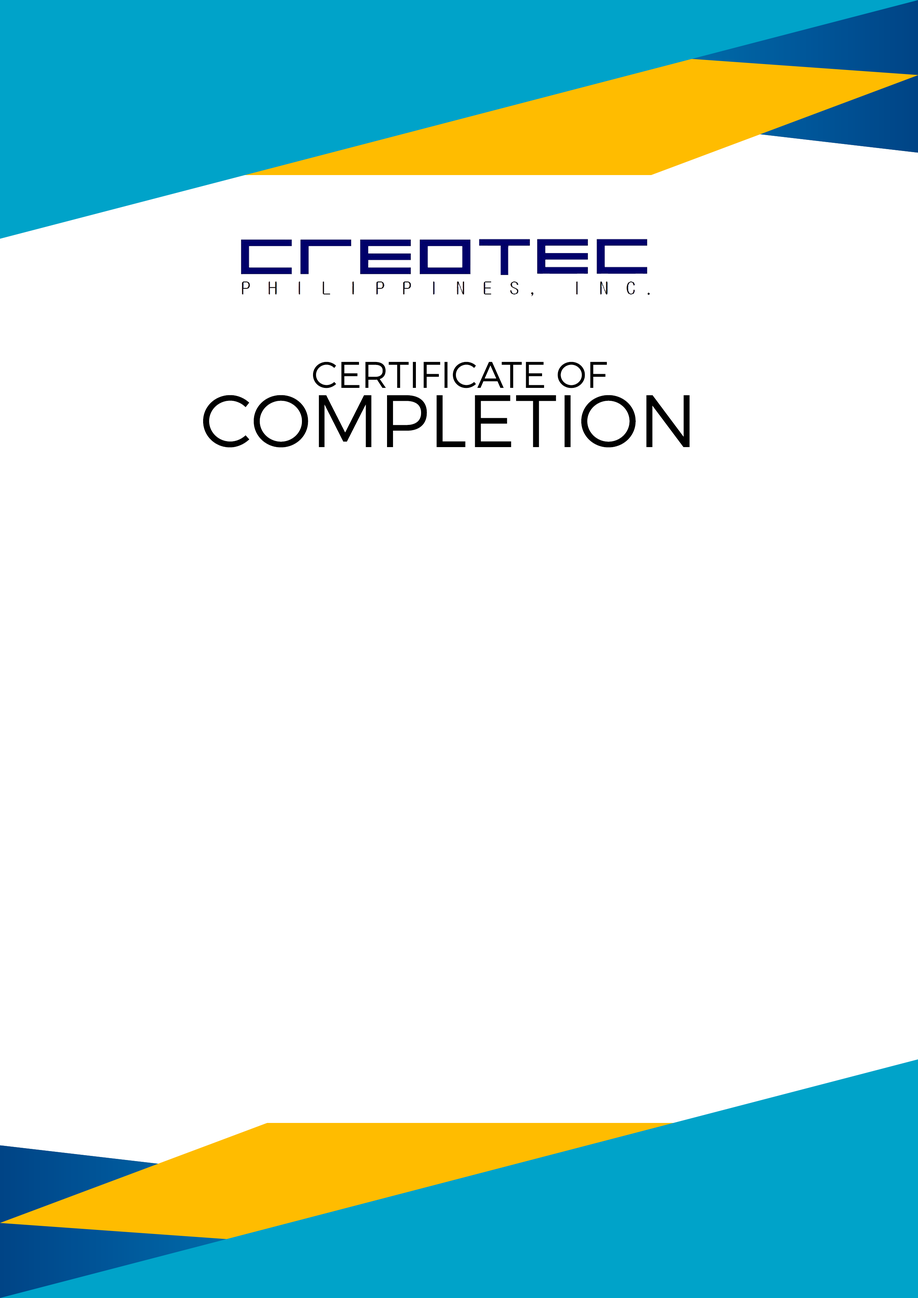
<style>
.page{position:relative;width:918px;height:1298px;background:#ffffff}
.page>*{position:absolute;margin:0}
.t1{font:37px "Montserrat-Light";color:#000000}
.t2{font:74px "Montserrat-Light";color:#000000}
</style>
<div class="page">
<p class="t1" style="left:313px;top:362px;width:294px;height:26px">CERTIFICATE OF</p>
<p class="t2" style="left:203px;top:395px;width:487px;height:53px">COMPLETION</p>
</div>
